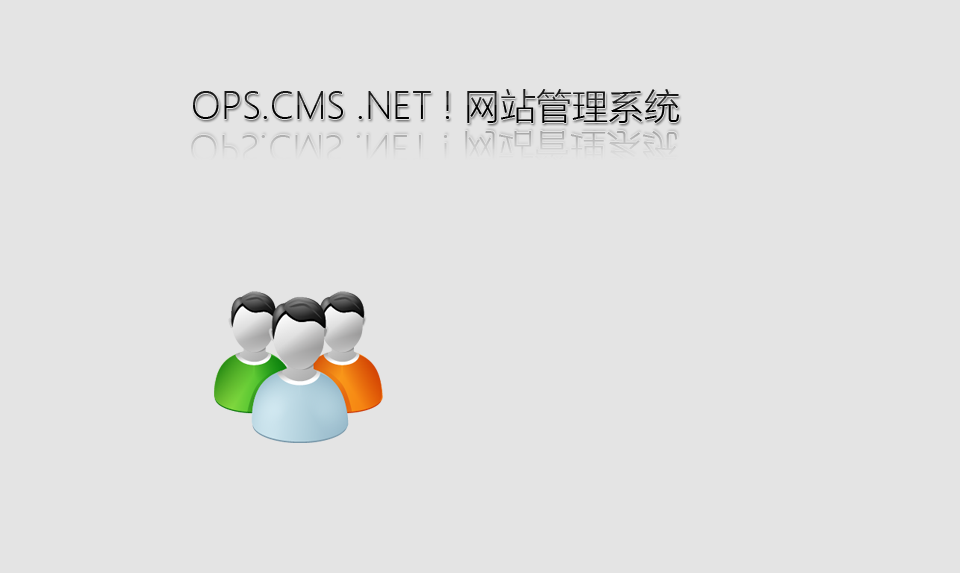
<style>
.page{position:relative;width:960px;height:573px;background:#e4e4e4}
.page>*{position:absolute;margin:0}
.t1{font:36px "MicrosoftYaHeiLight"}
</style>
<div class="page">
<p class="t1" style="left:193px;top:89px;width:487px;height:34px">OPS.CMS .NET ! 网站管理系统</p>
</div>
